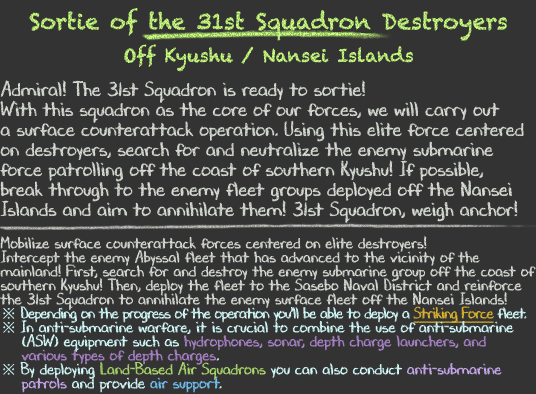
<style>
.page{position:relative;width:536px;height:394px;background:#333333}
.page>*{position:absolute;margin:0}
.t1{font:22px/36px "Chalkduster"}
.t2{font:18px/36px "Chalkduster"}
.t3{font:20px/20px "DJBChalkItUp";color:#d9ded6}
.t4{font:16px/14px "DJBChalkItUp";color:#d9ded6}
.t5{font:16px/14px "TimesNewRomanPSMT";color:#d7feff}
.t6{font:16px/14px "DJBChalkItUp";letter-spacing:-0.04em;color:#d7feff}
.t7{font:16px/14px "DJBChalkItUp";letter-spacing:-0.04em;color:#dfb731;text-decoration:underline}
.t8{font:16px/14px "DJBChalkItUp";color:#d7feff}
.t9{font:16px/14px "DJBChalkItUp";color:#aa84c9}
.t10{font:16px/14px "DJBChalkItUp";color:#aedb6f}
.t11{font:16px/14px "DJBChalkItUp";color:#c9abf0}
.t12{font:16px/14px "DJBChalkItUp";color:#74c6f6}
</style>
<div class="page">
<p class="t1" style="left:29px;top:8px;width:478px;height:64px;text-align:center">Sortie of the 31st Squadron Destroyers<br><span class="t2">Off Kyushu / Nansei Islands</span></p>
<p class="t3" style="left:0px;top:80px;width:536px;height:313px">Admiral! The 31st Squadron is ready to sortie!<br>With this squadron as the core of our forces, we will carry out<br>a surface counterattack operation. Using this elite force centered<br>on destroyers, search for and neutralize the enemy submarine<br>force patrolling off the coast of southern Kyushu! If possible,<br>break through to the enemy fleet groups deployed off the Nansei<br>Islands and aim to annihilate them! 31st Squadron, weigh anchor!<br><br><span class="t4">Mobilize surface counterattack forces centered on elite destroyers!<br>Intercept the enemy Abyssal fleet that has advanced to the vicinity of the<br>mainland! First, search for and destroy the enemy submarine group off the coast of<br>southern Kyushu! Then, deploy the fleet to the Sasebo Naval District and reinforce<br>the 31st Squadron to annihilate the enemy surface fleet off the Nansei Islands!<br></span><span class="t5">※ </span><span class="t6">Depending on the progress of the operation you'll be able to deploy a </span><span class="t7">Striking Force</span><span class="t6"> fleet.<br></span><span class="t5">※ </span><span class="t8">In anti-submarine warfare, it is crucial to combine the use of anti-submarine<br>　 (ASW) equipment such as </span><span class="t9">hydrophones, sonar, depth charge launchers, and<br>　 various types of depth charges</span><span class="t8">.<br></span><span class="t5">※ </span><span class="t8">By deploying </span><span class="t10">Land-Based Air Squadrons</span><span class="t8"> you can also conduct </span><span class="t11">anti-submarine<br>　 patrols</span><span class="t8"> and provide </span><span class="t12">air support</span><span class="t8">.</span></p>
</div>
